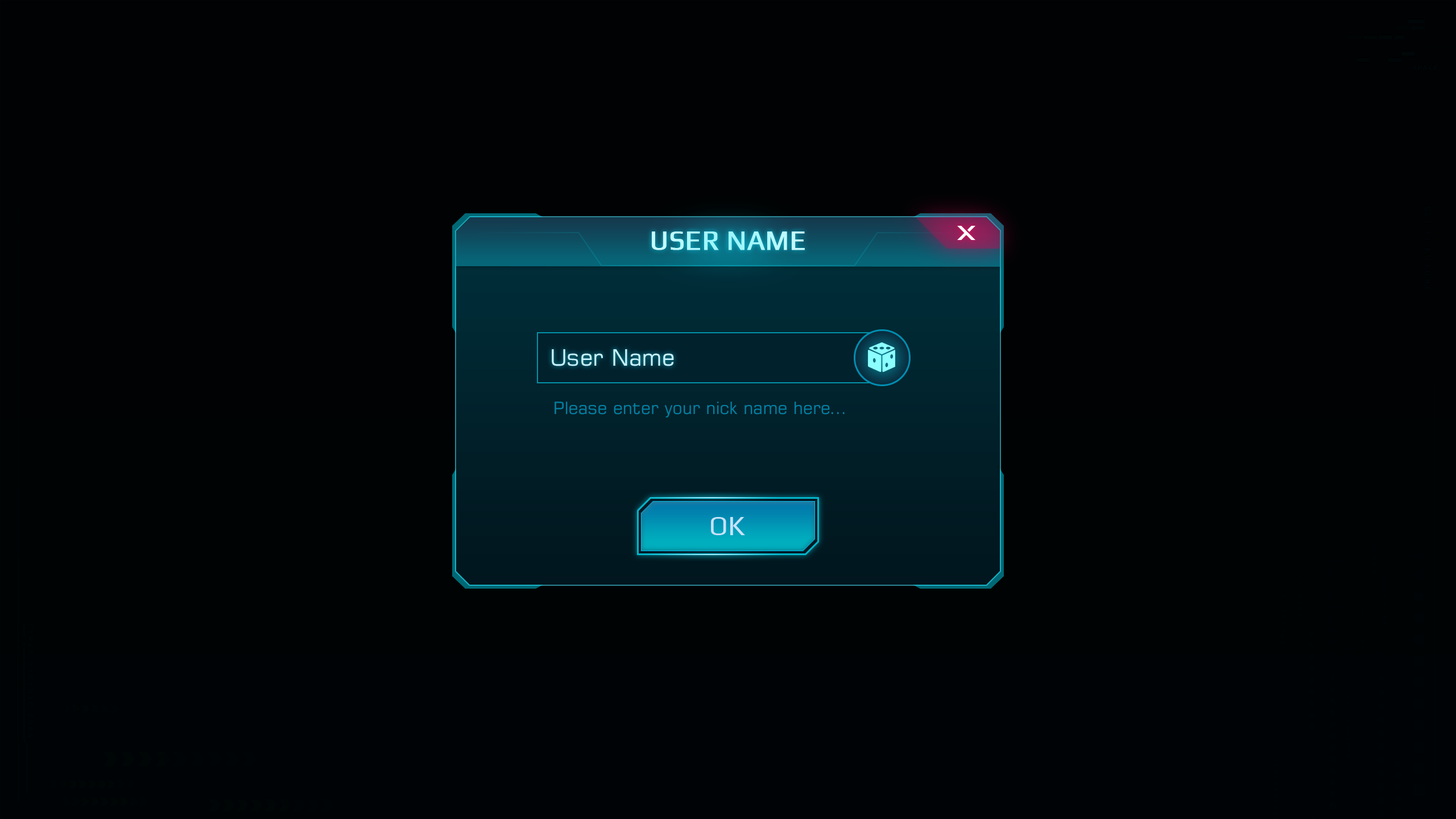
<style>
.page{position:relative;width:1456px;height:819px;background:#000203}
.page>*{position:absolute;margin:0}
.t1{font:27.3px "Play-Regular";color:#b1f8ff;font-weight:bold}
.t2{font:22.7px "Square721BT-Roman";color:#c5f2ff}
.t3{font:17.1px "Square721BT-Roman";color:#047fa2}
.t4{font:27.3px "Play-Regular";color:#c6e2ff}
</style>
<div class="page">
<p class="t1" style="left:652px;top:231px;width:153px;height:19px">USER NAME</p>
<p class="t2" style="left:552px;top:349px;width:122px;height:17px">User Name</p>
<p class="t3" style="left:555px;top:402px;width:290px;height:15px">Please enter your nick name here...</p>
<p class="t4" style="left:711px;top:517px;width:34px;height:18px">OK</p>
</div>
